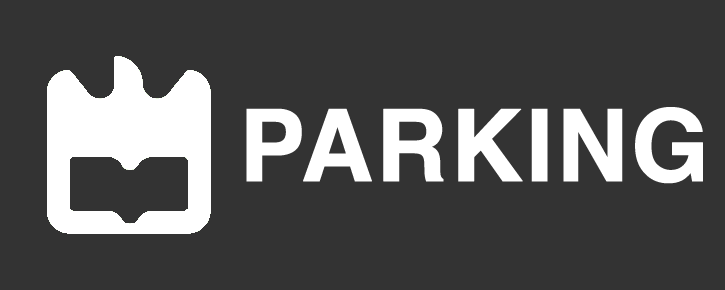
<style>
.page{position:relative;width:725px;height:290px;background:#333333}
.page>*{position:absolute;margin:0}
.t1{font:100px "Helvetica-Bold";color:#ffffff;text-transform:uppercase;font-weight:bold}
</style>
<div class="page">
<p class="t1" style="left:246px;top:107px;width:457px;height:77px">Parking</p>
</div>
